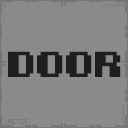
<style>
.page{position:relative;width:128px;height:128px;background:#8a8a8a}
.page>*{position:absolute;margin:0}
.t1{font:37px "KemcoPixelBold";color:#1e1e1e}
</style>
<div class="page">
<p class="t1" style="left:8px;top:51px;width:113px;height:26px">Door</p>
</div>
